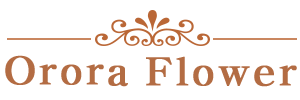
<style>
.page{position:relative;width:300px;height:100px;background:#ffffff}
.page>*{position:absolute;margin:0}
.t1{font:38px "H2mjrE";letter-spacing:0.025em;color:#b36c43;font-weight:bold}
</style>
<div class="page">
<p class="t1" style="left:5px;top:55px;width:292px;height:32px">Orora Flower</p>
</div>
